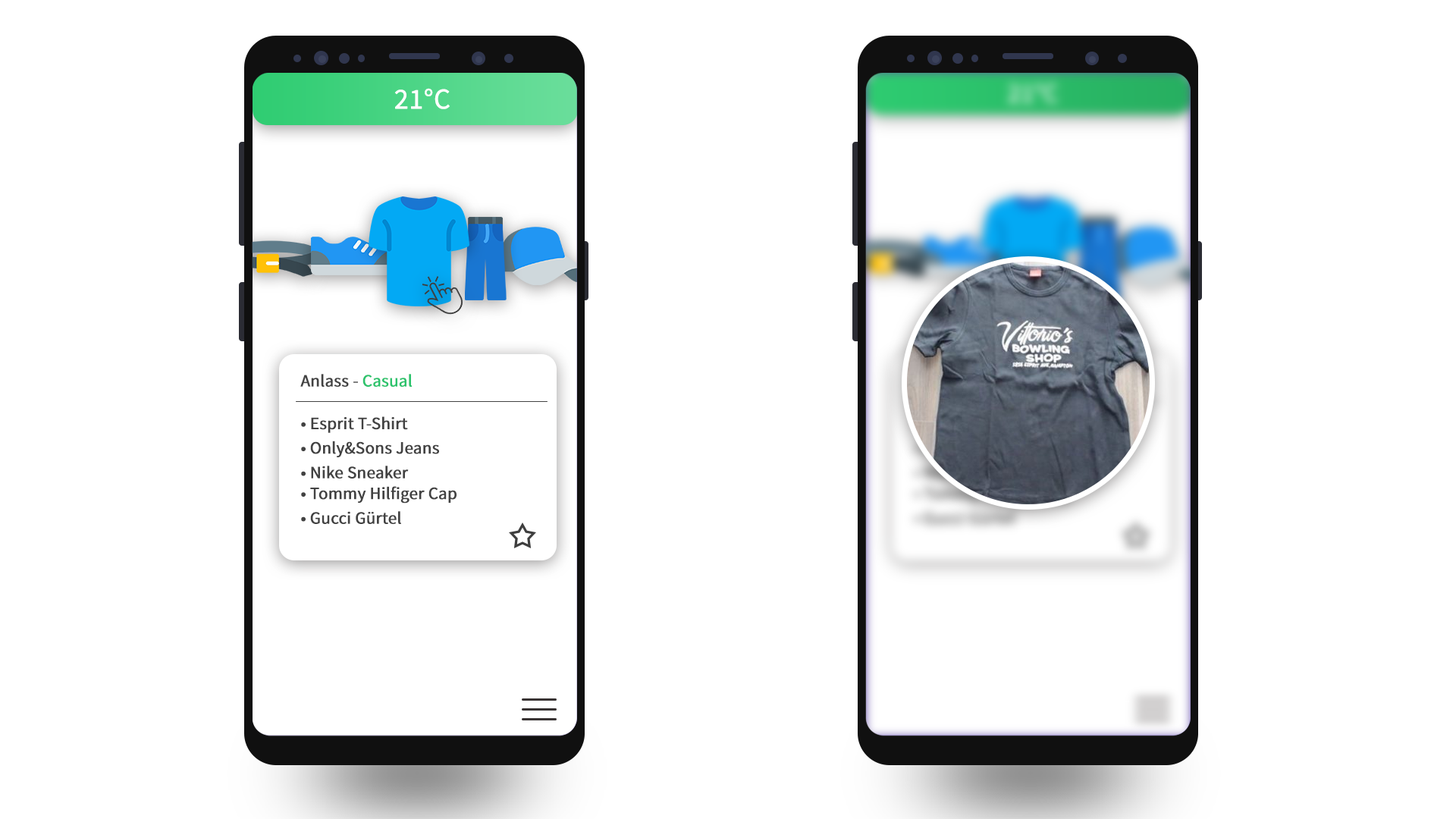
<style>
.page{position:relative;width:1456px;height:819px;background:#ffffff}
.page>*{position:absolute;margin:0}
.t1{font:28.8px "SourceSansPro-Regular";letter-spacing:-0.01em;color:#ffffff;font-weight:bold}
.t2{font:17.3px "SourceSansPro-Regular";letter-spacing:-0.01em;color:#424242;font-weight:bold}
.t3{font:17.3px "SourceSansPro-Regular";letter-spacing:-0.01em;color:#2cc36c;font-weight:bold}
</style>
<div class="page">
<p class="t1" style="left:394px;top:88px;width:56px;height:21px">21°C</p>
<p class="t2" style="left:300px;top:374px;width:113px;height:13px">Anlass - <span class="t3">Casual</span></p>
<p class="t2" style="left:301px;top:416px;width:107px;height:17px">• Esprit T-Shirt</p>
<p class="t2" style="left:301px;top:441px;width:138px;height:16px">• Only&amp;Sons Jeans</p>
<p class="t2" style="left:301px;top:466px;width:108px;height:13px">• Nike Sneaker</p>
<p class="t2" style="left:301px;top:486px;width:156px;height:18px">• Tommy Hilfiger Cap</p>
<p class="t2" style="left:301px;top:511px;width:100px;height:13px">• Gucci Gürtel</p>
</div>
